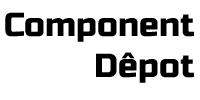
<style>
.page{position:relative;width:200px;height:100px;background:#ffffff}
.page>*{position:absolute;margin:0}
.t1{font:33.3px "RussoOne-Regular";color:#000000}
</style>
<div class="page">
<p class="t1" style="left:5px;top:12px;width:189px;height:30px">Component</p>
<p class="t1" style="left:96px;top:52px;width:98px;height:31px">Dêpot</p>
</div>
